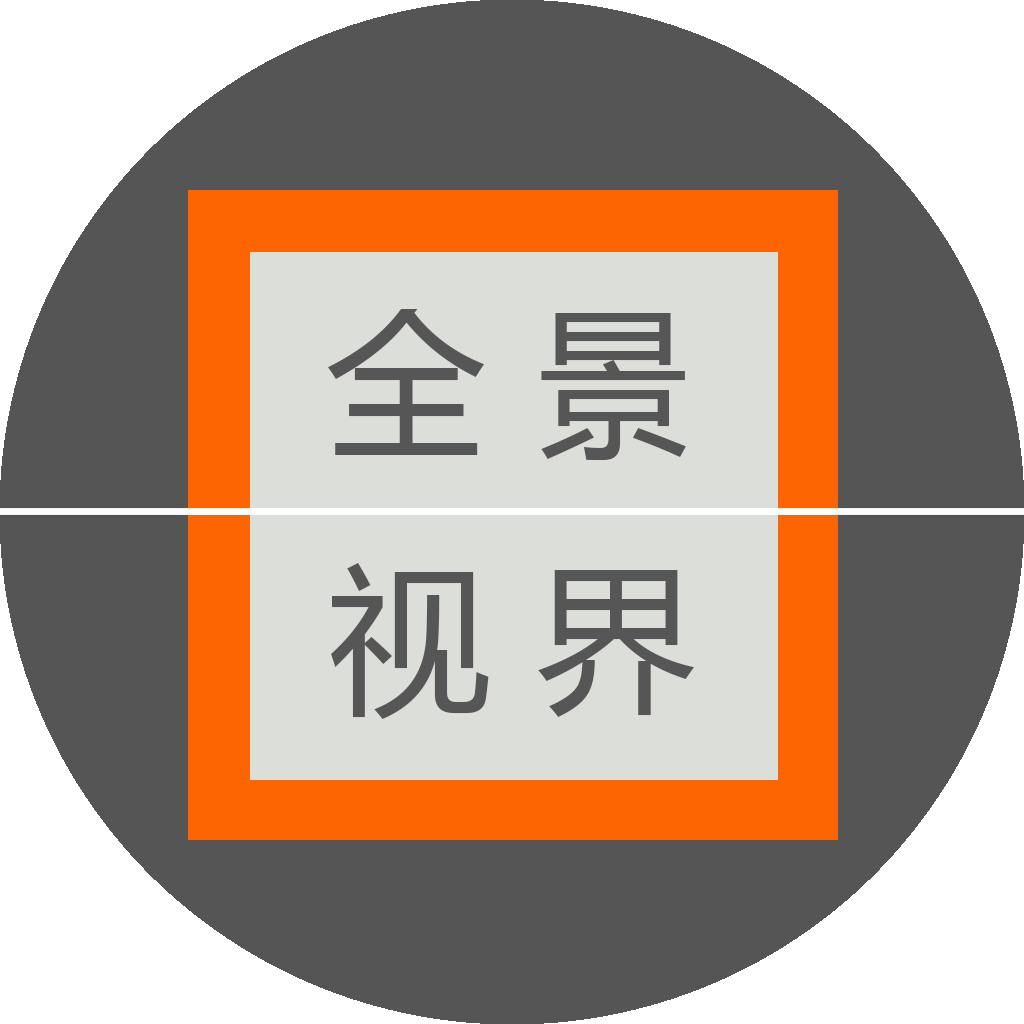
<style>
.page{position:relative;width:1024px;height:1024px;background:#555555}
.page>*{position:absolute;margin:0}
.t1{font:160px "MicrosoftYaHei";color:#565656}
</style>
<div class="page">
<p class="t1" style="left:328px;top:309px;width:358px;height:151px">全 景</p>
<p class="t1" style="left:331px;top:563px;width:363px;height:156px">视 界</p>
</div>
